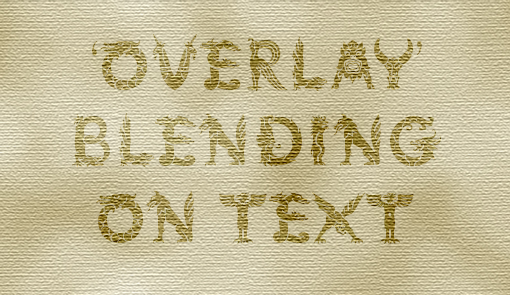
<style>
.page{position:relative;width:510px;height:295px}
.page>*{position:absolute;margin:0}
.t1{font:63.9px "MythosStd"}
</style>
<div class="page">
<p class="t1" style="left:72px;top:34px;width:369px;height:211px;text-align:center">‘overlay’<br>Blending<br>on text</p>
</div>
